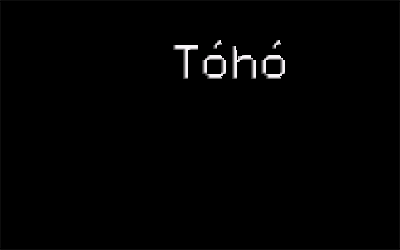
<style>
.page{position:relative;width:400px;height:250px;background:#000000}
.page>*{position:absolute;margin:0}
.t1{font:39.1px "PFTempestaSeven"}
</style>
<div class="page">
<p class="t1" style="left:173px;top:40px;width:112px;height:39px">Tóhó</p>
</div>
